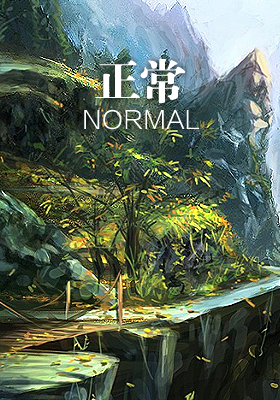
<style>
.page{position:relative;width:280px;height:400px}
.page>*{position:absolute;margin:0}
.t1{font:48px "FZDBSJW--GB1-0";letter-spacing:-0.06em;color:#ffffff}
.t2{font:24px "FZLTXHK--GBK1-0";letter-spacing:0.04em;color:#ffffff}
</style>
<div class="page">
<p class="t1" style="left:95px;top:58px;width:91px;height:46px">正常</p>
<p class="t2" style="left:84px;top:109px;width:115px;height:21px">NORMAL</p>
</div>
